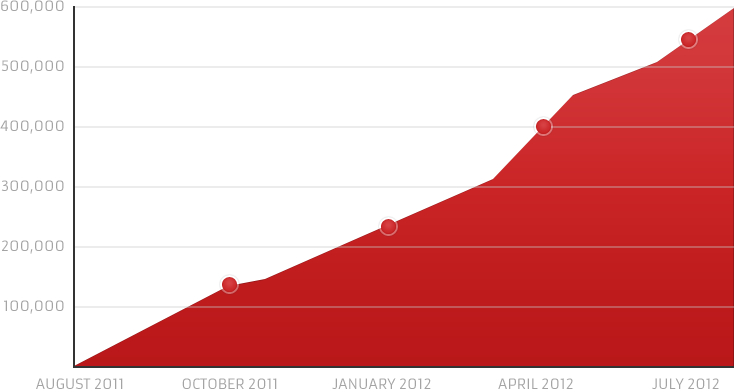
<style>
.page{position:relative;width:734px;height:389px;background:#ffffff}
.page>*{position:absolute;margin:0}
.t1{font:14px "Armata-Regular";color:#a4a4a4;text-transform:uppercase}
</style>
<div class="page">
<p class="t1" style="left:1px;top:0px;width:63px;height:14px">600,000</p>
<p class="t1" style="left:1px;top:60px;width:63px;height:14px">500,000</p>
<p class="t1" style="left:0px;top:120px;width:64px;height:14px">400,000</p>
<p class="t1" style="left:1px;top:180px;width:63px;height:14px">300,000</p>
<p class="t1" style="left:2px;top:240px;width:62px;height:14px">200,000</p>
<p class="t1" style="left:4px;top:300px;width:60px;height:14px">100,000</p>
<p class="t1" style="left:36px;top:378px;width:87px;height:11px">August 2011</p>
<p class="t1" style="left:182px;top:378px;width:95px;height:11px">october 2011</p>
<p class="t1" style="left:332px;top:378px;width:99px;height:11px">January 2012</p>
<p class="t1" style="left:498px;top:378px;width:75px;height:11px">April 2012</p>
<p class="t1" style="left:652px;top:378px;width:67px;height:11px">July 2012</p>
</div>
